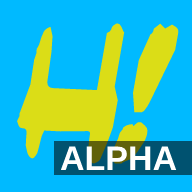
<style>
.page{position:relative;width:192px;height:192px;background:#00baff}
.page>*{position:absolute;margin:0}
.t1{font:140px "Yesterdaysmeal";color:#dbdd17}
.t2{font:34px "LiberationSans-Bold";color:#ffffff}
</style>
<div class="page">
<p class="t1" style="left:17px;top:23px;width:162px;height:141px">H!</p>
<p class="t2" style="left:60px;top:146px;width:117px;height:24px">ALPHA</p>
</div>
